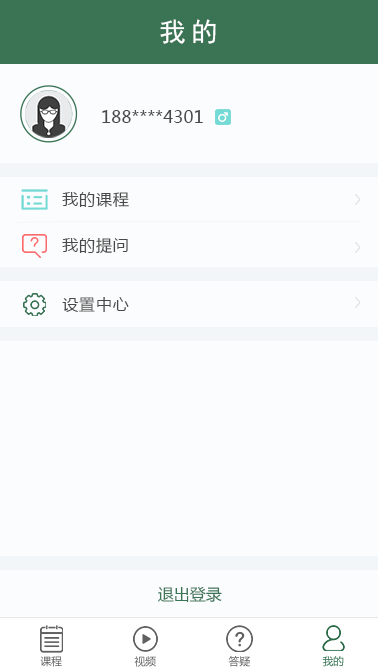
<style>
.page{position:relative;width:378px;height:672px;background:#fbfcfd}
.page>*{position:absolute;margin:0}
.t1{font:26.7px "SimHei";letter-spacing:0.2em;color:#ffffff}
.t2{font:17.3px "MicrosoftYaHei";color:#484949}
.t3{font:16px "MicrosoftYaHei";letter-spacing:0.05em;color:#484949}
.t4{font:16px "MicrosoftYaHei";color:#3a7455}
.t5{font:10.7px "MicrosoftYaHei";color:#606060}
.t6{font:10.7px "MicrosoftYaHei"}
.t7{font:10.7px "MicrosoftYaHei";color:#286a46}
</style>
<div class="page">
<p class="t1" style="left:160px;top:19px;width:56px;height:25px">我的</p>
<p class="t2" style="left:102px;top:110px;width:101px;height:13px">188****4301</p>
<p class="t3" style="left:62px;top:192px;width:67px;height:15px">我的课程</p>
<p class="t3" style="left:62px;top:238px;width:66px;height:16px">我的提问</p>
<p class="t3" style="left:62px;top:297px;width:67px;height:15px">设置中心</p>
<p class="t4" style="left:158px;top:586px;width:64px;height:16px">退出登录</p>
<p class="t5" style="left:40px;top:656px;width:22px;height:11px">课程</p>
<p class="t5" style="left:134px;top:656px;width:22px;height:11px">视频</p>
<p class="t6" style="left:228px;top:656px;width:22px;height:11px">答疑</p>
<p class="t7" style="left:322px;top:656px;width:22px;height:11px">我的</p>
</div>
